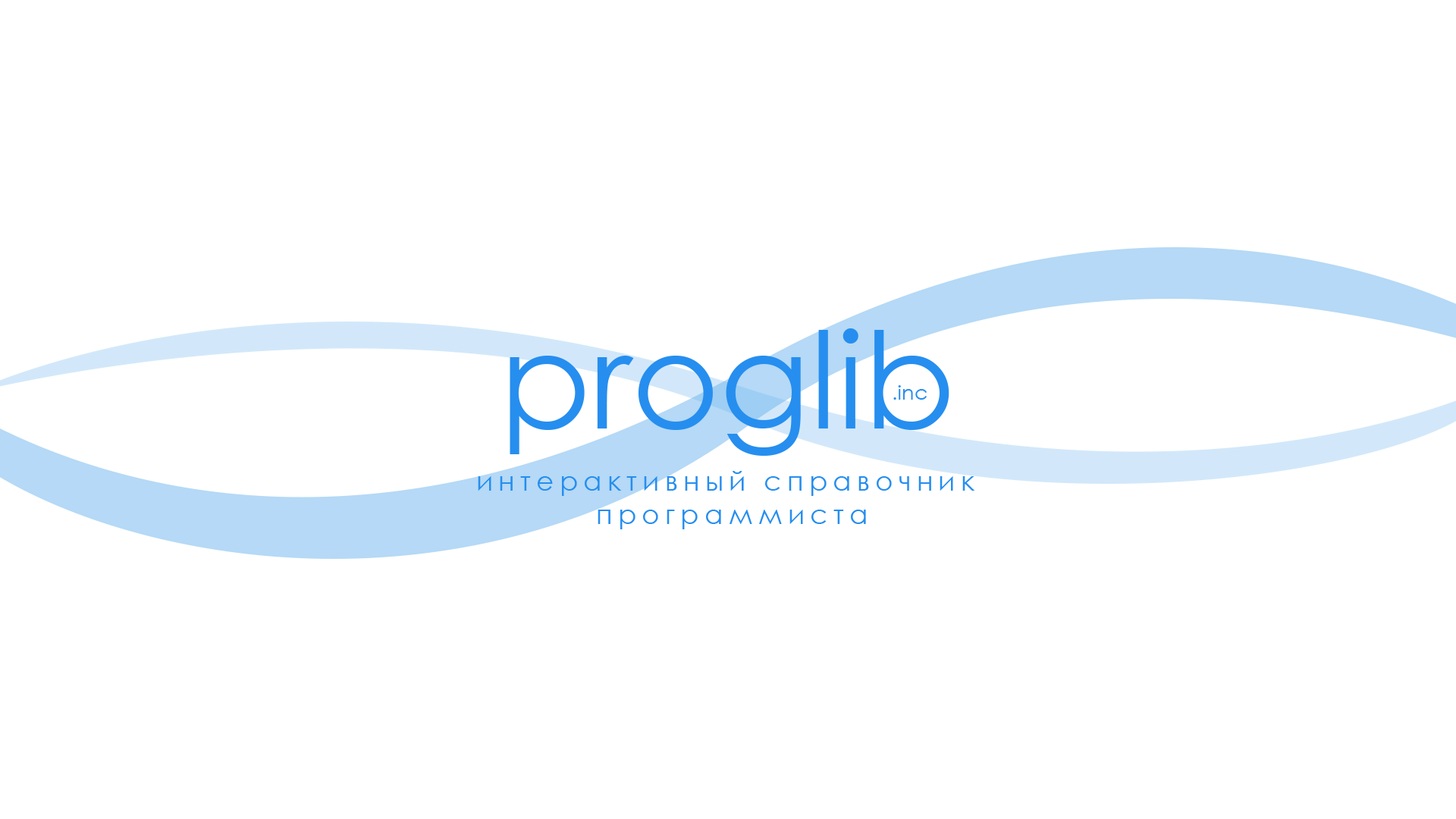
<style>
.page{position:relative;width:1456px;height:819px;background:#ffffff}
.page>*{position:absolute;margin:0}
.t1{font:134.4px "CenturyGothic";color:#268eef}
.t2{font:20.7px "CenturyGothic";color:#268eef}
.t3{font:27.3px "CenturyGothic";letter-spacing:0.2em;color:#268eef}
</style>
<div class="page">
<p class="t1" style="left:510px;top:328px;width:439px;height:128px">proglib</p>
<p class="t2" style="left:893px;top:385px;width:34px;height:15px">.inc</p>
<p class="t3" style="left:478px;top:471px;width:497px;height:58px;text-align:center">интерактивный справочник <br>программиста</p>
</div>
